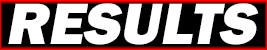
<style>
.page{position:relative;width:267px;height:50px;background:#ffffff}
.page>*{position:absolute;margin:0}
.t1{font:60.5px "FranklinGothic-Heavy";color:#ffffff;font-style:italic}
</style>
<div class="page">
<p class="t1" style="left:8px;top:3px;width:251px;height:42px">RESULTS</p>
</div>
